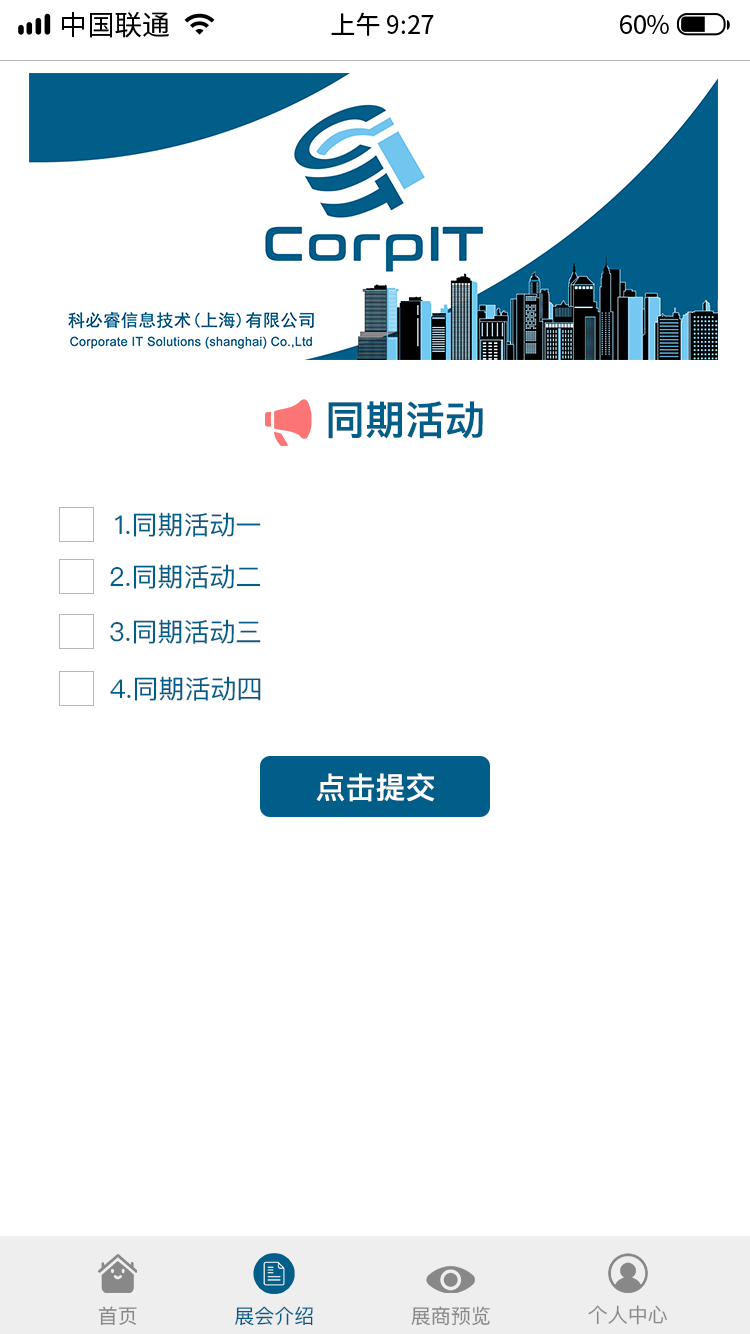
<style>
.page{position:relative;width:750px;height:1334px;background:#ffffff}
.page>*{position:absolute;margin:0}
.t1{font:27.8px "SourceHanSansCN-Regular";color:#000000}
.t2{font:25px "SourceHanSansCN-Regular";color:#000000}
.t3{font:40px "PingFangTC-Semibold";color:#015e89}
.t4{font:26px "PingFangTC";color:#015e89}
.t5{font:30px "PingFangTC-Semibold";color:#ffffff}
.t6{font:20px "PingFangTC";color:#888888}
.t7{font:20px "PingFangTC";color:#015e89}
</style>
<div class="page">
<p class="t1" style="left:62px;top:12px;width:107px;height:26px">中国联通</p>
<p class="t2" style="left:331px;top:12px;width:103px;height:24px">上午 9:27</p>
<p class="t2" style="left:620px;top:15px;width:49px;height:19px">60%</p>
<p class="t3" style="left:328px;top:401px;width:155px;height:38px">同期活动</p>
<p class="t4" style="left:115px;top:512px;width:146px;height:25px">1.同期活动一</p>
<p class="t4" style="left:110px;top:564px;width:151px;height:25px">2.同期活动二</p>
<p class="t4" style="left:110px;top:619px;width:151px;height:25px">3.同期活动三</p>
<p class="t4" style="left:110px;top:676px;width:151px;height:25px">4.同期活动四</p>
<p class="t5" style="left:316px;top:773px;width:119px;height:29px">点击提交</p>
<p class="t6" style="left:99px;top:1306px;width:38px;height:20px">首页</p>
<p class="t7" style="left:235px;top:1306px;width:78px;height:20px">展会介绍</p>
<p class="t6" style="left:411px;top:1306px;width:79px;height:20px">展商预览</p>
<p class="t6" style="left:588px;top:1305px;width:79px;height:20px">个人中心</p>
</div>
